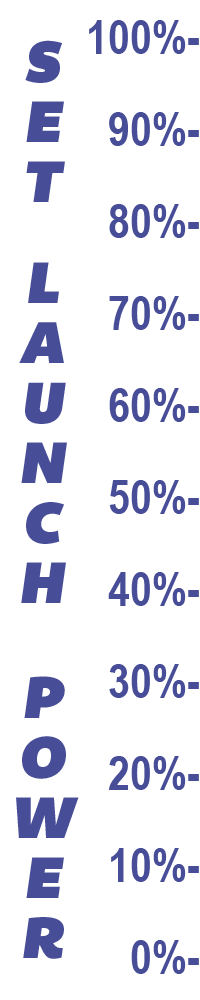
<style>
.page{position:relative;width:200px;height:1000px;background:#ffffff}
.page>*{position:absolute;margin:0}
.t1{font:48px/92px "ArialNarrow-Bold";color:#484d97}
.t2{font:60px "BemioItalic";color:#484d97}
</style>
<div class="page">
<p class="t1" style="left:89px;top:20px;width:110px;height:954px;text-align:right">100%-<br>90%-<br>80%-<br>70%-<br>60%-<br>50%-<br>40%-<br>30%-<br>20%-<br>10%-<br>0%-</p>
<p class="t2" style="left:16px;top:40px;width:63px;height:919px;text-align:center">SET   LAUNCH    POWER</p>
</div>
